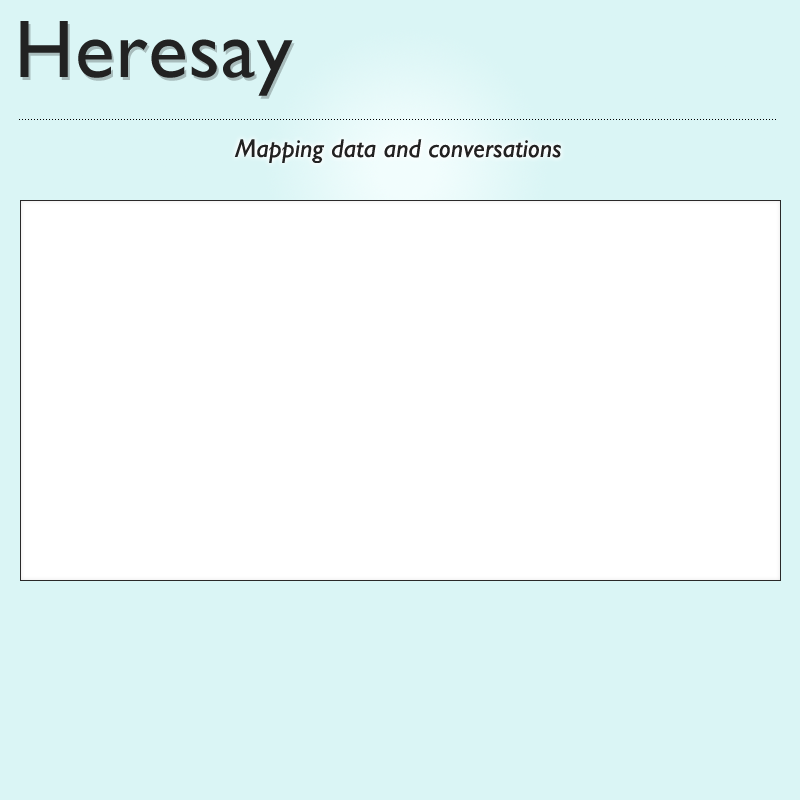
<style>
.page{position:relative;width:800px;height:800px;background:#daf5f5}
.page>*{position:absolute;margin:0}
.t1{font:82px "GillSans";letter-spacing:0.01em;color:#222222}
.t2{font:26px "GillSans-Italic";letter-spacing:0.01em;color:#222222}
</style>
<div class="page">
<p class="t1" style="left:20px;top:21px;width:273px;height:75px">Heresay</p>
<p class="t2" style="left:234px;top:139px;width:327px;height:24px">Mapping data and conversations</p>
</div>
